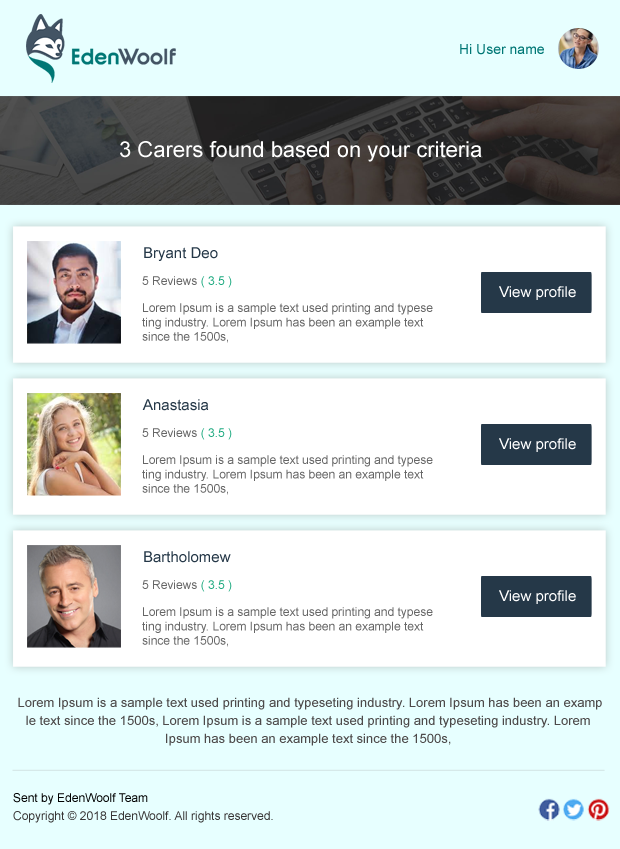
<style>
.page{position:relative;width:620px;height:849px;background:#ffffff}
.page>*{position:absolute;margin:0}
.t1{font:14px "Arial";color:#007775}
.t2{font:22px "Arial";color:#ffffff}
.t3{font:15px "Arial";color:#253848}
.t4{font:12px "Arial";color:#666666}
.t5{font:12px "Arial";color:#1ca97f}
.t6{font:15px "Arial";color:#ffffff}
.t7{font:12px/14.4px "Arial";color:#666666}
.t8{font:13px/18px "Arial";color:#4d4a4a}
.t9{font:12px/18px "Arial";color:#383636}
.t10{font:12px/18px "Arial";color:#010101}
</style>
<div class="page">
<p class="t1" style="left:460px;top:44px;width:84px;height:11px">Hi User name</p>
<p class="t2" style="left:120px;top:141px;width:362px;height:21px">3 Carers found based on your criteria</p>
<p class="t3" style="left:144px;top:247px;width:74px;height:14px">Bryant Deo</p>
<p class="t4" style="left:142px;top:276px;width:90px;height:12px">5 Reviews <span class="t5">( 3.5 )</span></p>
<p class="t6" style="left:499px;top:286px;width:77px;height:14px">View profile</p>
<p class="t7" style="left:142px;top:303px;width:291px;height:40px">Lorem Ipsum is a sample text used printing and typese<br>ting industry. Lorem Ipsum has been an example text <br>since the 1500s,</p>
<p class="t3" style="left:142px;top:399px;width:67px;height:12px">Anastasia</p>
<p class="t4" style="left:142px;top:428px;width:90px;height:12px">5 Reviews <span class="t5">( 3.5 )</span></p>
<p class="t6" style="left:499px;top:438px;width:77px;height:14px">View profile</p>
<p class="t7" style="left:142px;top:455px;width:291px;height:40px">Lorem Ipsum is a sample text used printing and typese<br>ting industry. Lorem Ipsum has been an example text <br>since the 1500s,</p>
<p class="t3" style="left:144px;top:551px;width:87px;height:12px">Bartholomew</p>
<p class="t4" style="left:142px;top:580px;width:90px;height:12px">5 Reviews <span class="t5">( 3.5 )</span></p>
<p class="t6" style="left:499px;top:590px;width:77px;height:14px">View profile</p>
<p class="t7" style="left:142px;top:607px;width:291px;height:40px">Lorem Ipsum is a sample text used printing and typese<br>ting industry. Lorem Ipsum has been an example text <br>since the 1500s,</p>
<p class="t8" style="left:18px;top:697px;width:584px;height:49px;text-align:center">Lorem Ipsum is a sample text used printing and typeseting industry. Lorem Ipsum has been an examp<br>le text since the 1500s, Lorem Ipsum is a sample text used printing and typeseting industry. Lorem <br>Ipsum has been an example text since the 1500s,</p>
<p class="t9" style="left:13px;top:793px;width:260px;height:30px"><span class="t10">Sent by EdenWoolf Team</span> <br>Copyright © 2018 EdenWoolf. All rights reserved.</p>
</div>
